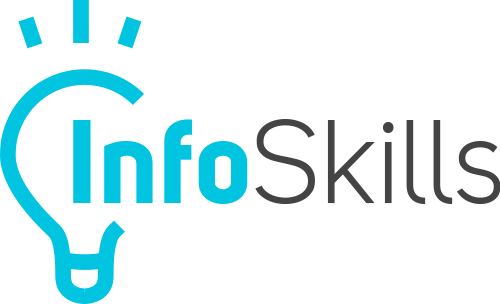
<style>
.page{position:relative;width:500px;height:304px;background:#ffffff}
.page>*{position:absolute;margin:0}
.t1{font:116.9px "UniSansBook";color:#444444}
.t2{font:116.9px "UniSansBold";color:#00c4e0}
</style>
<div class="page">
<p class="t1" style="left:73px;top:119px;width:428px;height:85px"><span class="t2">Info</span>Skills</p>
</div>
